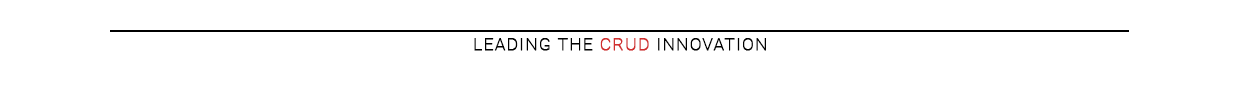
<style>
.page{position:relative;width:1240px;height:100px;background:#ffffff}
.page>*{position:absolute;margin:0}
.t1{font:16.7px "Roboto-Thin";letter-spacing:0.08em;color:#010101;font-weight:bold}
.t2{font:16.7px "Roboto-Thin";letter-spacing:0.08em;color:#d12f2f;font-weight:bold}
</style>
<div class="page">
<p class="t1" style="left:474px;top:38px;width:292px;height:13px">LEADING THE <span class="t2">CRUD </span>INNOVATION</p>
</div>
